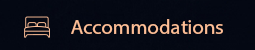
<style>
.page{position:relative;width:255px;height:50px;background:#040813}
.page>*{position:absolute;margin:0}
.t1{font:20.8px "MyriadPro-Regular";color:#febf97}
</style>
<div class="page">
<p class="t1" style="left:71px;top:19px;width:152px;height:15px">Accommodations</p>
</div>
